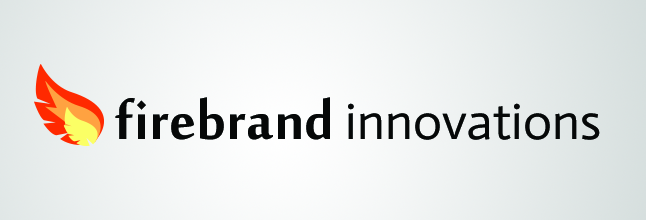
<style>
.page{position:relative;width:646px;height:220px}
.page>*{position:absolute;margin:0}
.t1{font:50.3px "Actor-Regular";letter-spacing:0.003em;color:#060808}
.t2{font:81.8px "MoolBoran";letter-spacing:0.003em;color:#060808}
</style>
<div class="page">
<p class="t1" style="left:115px;top:97px;width:485px;height:43px"><span class="t2">firebrand </span>innovations</p>
</div>
